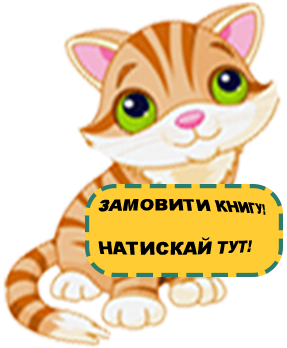
<style>
.page{position:relative;width:287px;height:348px;background:#ffffff}
.page>*{position:absolute;margin:0}
.t1{font:14px "Arial-Black";color:#000000}
</style>
<div class="page">
<p class="t1" style="left:98px;top:199px;width:168px;height:56px;text-align:center">ЗАМОВИТИ КНИГУ! <br><br>  НАТИСКАЙ ТУТ!</p>
</div>
